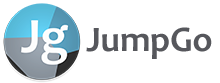
<style>
.page{position:relative;width:220px;height:83px;background:#ffffff}
.page>*{position:absolute;margin:0}
.t1{font:36px "Candara-Bold";color:#56575c}
</style>
<div class="page">
<p class="t1" style="left:86px;top:27px;width:126px;height:32px">JumpGo</p>
</div>
